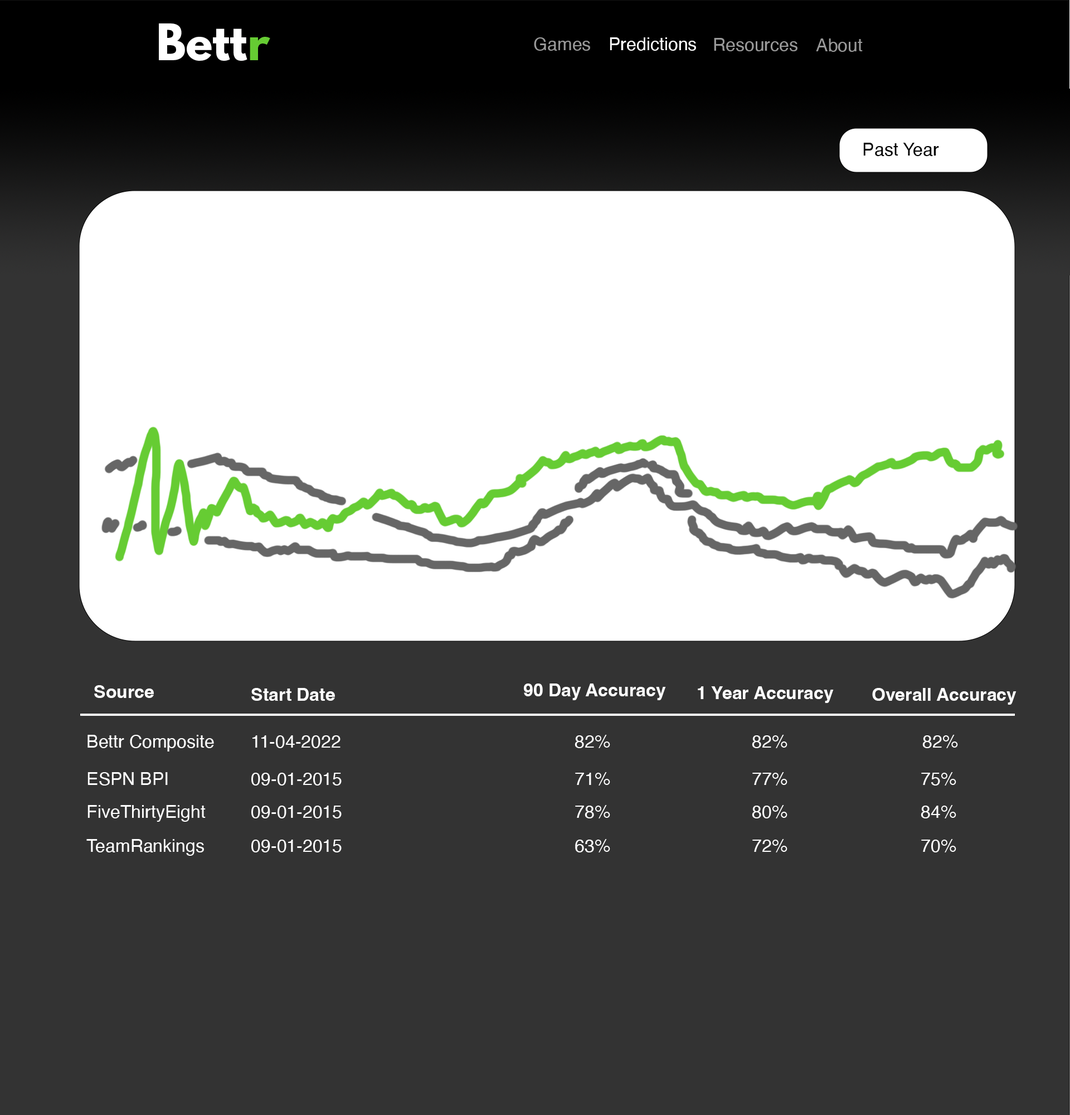
<style>
.page{position:relative;width:1070px;height:1115px;background:#333333}
.page>*{position:absolute;margin:0}
.t1{font:44.6px "LeagueSpartan-Bold";color:#ffffff}
.t2{font:44.6px "LeagueSpartan-Bold";color:#66cc33}
.t3{font:17.8px "Helvetica";color:#999999}
.t4{font:17.8px "Helvetica";color:#ffffff}
.t5{font:17.8px "Helvetica";color:#000000}
.t6{font:17.8px "Helvetica-Bold";color:#ffffff}
</style>
<div class="page">
<p class="t1" style="left:159px;top:23px;width:111px;height:38px">Bett<span class="t2">r</span></p>
<p class="t3" style="left:534px;top:37px;width:56px;height:14px">Games</p>
<p class="t4" style="left:610px;top:37px;width:86px;height:14px">Predictions</p>
<p class="t3" style="left:714px;top:38px;width:83px;height:13px">Resources</p>
<p class="t3" style="left:816px;top:38px;width:47px;height:14px">About</p>
<p class="t5" style="left:863px;top:143px;width:76px;height:13px">Past Year</p>
<p class="t6" style="left:94px;top:685px;width:60px;height:13px">Source</p>
<p class="t6" style="left:251px;top:688px;width:84px;height:12px">Start Date</p>
<p class="t6" style="left:524px;top:683px;width:142px;height:17px">90 Day Accuracy</p>
<p class="t6" style="left:698px;top:686px;width:136px;height:17px">1 Year Accuracy</p>
<p class="t6" style="left:872px;top:688px;width:144px;height:16px">Overall Accuracy</p>
<p class="t4" style="left:87px;top:734px;width:127px;height:17px">Bettr Composite</p>
<p class="t4" style="left:252px;top:735px;width:88px;height:13px">11-04-2022</p>
<p class="t4" style="left:575px;top:734px;width:35px;height:14px">82%</p>
<p class="t4" style="left:752px;top:734px;width:35px;height:14px">82%</p>
<p class="t4" style="left:922px;top:734px;width:36px;height:14px">82%</p>
<p class="t4" style="left:87px;top:772px;width:81px;height:13px">ESPN BPI</p>
<p class="t4" style="left:251px;top:772px;width:91px;height:13px">09-01-2015</p>
<p class="t4" style="left:575px;top:772px;width:35px;height:13px">71%</p>
<p class="t4" style="left:752px;top:772px;width:35px;height:13px">77%</p>
<p class="t4" style="left:921px;top:772px;width:35px;height:13px">75%</p>
<p class="t4" style="left:87px;top:805px;width:119px;height:16px">FiveThirtyEight</p>
<p class="t4" style="left:251px;top:805px;width:91px;height:13px">09-01-2015</p>
<p class="t4" style="left:575px;top:805px;width:35px;height:13px">78%</p>
<p class="t4" style="left:752px;top:805px;width:35px;height:13px">80%</p>
<p class="t4" style="left:921px;top:805px;width:35px;height:13px">84%</p>
<p class="t4" style="left:86px;top:839px;width:118px;height:16px">TeamRankings</p>
<p class="t4" style="left:251px;top:839px;width:91px;height:13px">09-01-2015</p>
<p class="t4" style="left:575px;top:839px;width:35px;height:13px">63%</p>
<p class="t4" style="left:752px;top:839px;width:35px;height:13px">72%</p>
<p class="t4" style="left:921px;top:839px;width:35px;height:13px">70%</p>
</div>
